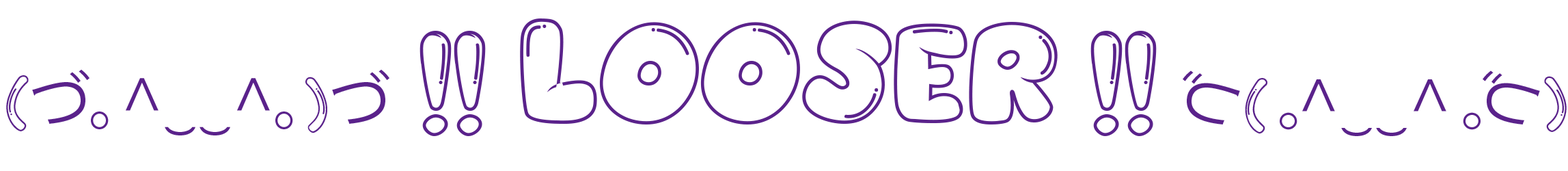
<style>
.page{position:relative;width:1568px;height:171px;background:#ffffff}
.page>*{position:absolute;margin:0}
.t1{font:124.2px "Balonku-Regular";color:#5a228b}
.t2{font:62.1px "Balonku-Regular";color:#5a228b}
.t3{font:62.1px "KozGoPr6N-Regular";color:#5a228b}
.t4{font:61.6px "KozGoPr6N-Regular";color:#5a228b}
.t5{font:61.6px "Balonku-Regular";color:#5a228b}
</style>
<div class="page">
<p class="t1" style="left:6px;top:18px;width:1151px;height:118px"><span class="t2">(</span><span class="t3">づ。^‿‿^。</span><span class="t2">)</span><span class="t3">づ  </span>!! LOOSER !!</p>
<p class="t4" style="left:1183px;top:70px;width:384px;height:66px;rotate:180deg"><span class="t5">(</span>づ。^‿‿^。<span class="t5">)</span>づ</p>
</div>
